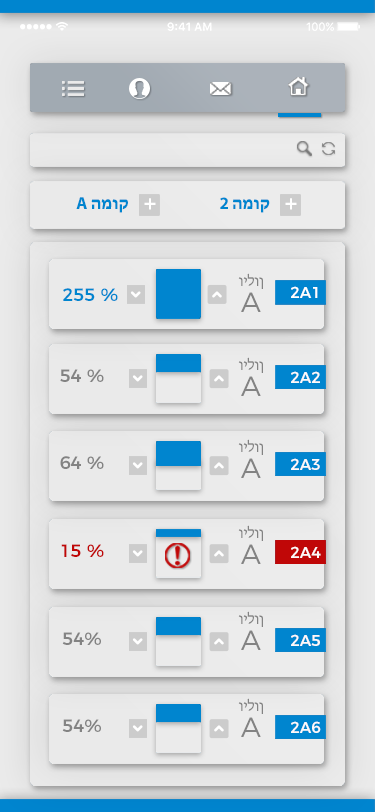
<style>
.page{position:relative;width:375px;height:812px}
.page>*{position:absolute;margin:0}
.t1{font:17.3px "MyriadHebrew-Bold";color:#0085cf}
.t2{font:23.7px "Montserrat-Regular";color:#ffffff;text-transform:uppercase}
.t3{font:15.6px/11.2px "MyriadHebrew-Regular";color:#838383}
.t4{font:27.9px/22.9px "Montserrat-Light";color:#838383}
.t5{font:17.8px "Montserrat-Medium";color:#0085cf}
.t6{font:15.6px "Montserrat-Medium";color:#ffffff}
.t7{font:17.8px "Montserrat-Medium";color:#838383}
.t8{font:15.6px "Montserrat-Medium";color:#fef9f9}
.t9{font:17.8px "Montserrat-Medium";color:#c00707}
</style>
<div class="page">
<p class="t1" style="left:76px;top:197px;width:52px;height:16px">A המוק</p>
<p class="t2" style="left:144px;top:198px;width:12px;height:12px">+</p>
<p class="t1" style="left:220px;top:197px;width:50px;height:16px">2 המוק</p>
<p class="t2" style="left:285px;top:198px;width:12px;height:12px">+</p>
<p class="t3" style="left:238px;top:273px;width:25px;height:39px;text-align:center">וילון<br><span class="t4">A</span></p>
<p class="t5" style="left:63px;top:288px;width:55px;height:13px">255 %</p>
<p class="t6" style="left:291px;top:286px;width:27px;height:12px">2A1</p>
<p class="t3" style="left:238px;top:357px;width:25px;height:39px;text-align:center">וילון<br><span class="t4">A</span></p>
<p class="t7" style="left:60px;top:369px;width:44px;height:13px">54 %</p>
<p class="t8" style="left:291px;top:371px;width:29px;height:12px">2A2</p>
<p class="t3" style="left:238px;top:439px;width:25px;height:39px;text-align:center">וילון<br><span class="t4">A</span></p>
<p class="t7" style="left:60px;top:456px;width:44px;height:13px">64 %</p>
<p class="t8" style="left:291px;top:458px;width:29px;height:12px">2A3</p>
<p class="t3" style="left:238px;top:525px;width:25px;height:39px;text-align:center">וילון<br><span class="t4">A</span></p>
<p class="t9" style="left:61px;top:544px;width:43px;height:13px">15 %</p>
<p class="t8" style="left:291px;top:546px;width:30px;height:12px">2A4</p>
<p class="t3" style="left:238px;top:611px;width:25px;height:39px;text-align:center">וילון<br><span class="t4">A</span></p>
<p class="t7" style="left:62px;top:632px;width:39px;height:13px">54%</p>
<p class="t8" style="left:291px;top:634px;width:29px;height:12px">2A5</p>
<p class="t3" style="left:238px;top:698px;width:25px;height:39px;text-align:center">וילון<br><span class="t4">A</span></p>
<p class="t7" style="left:62px;top:719px;width:39px;height:13px">54%</p>
<p class="t8" style="left:291px;top:721px;width:30px;height:12px">2A6</p>
</div>
